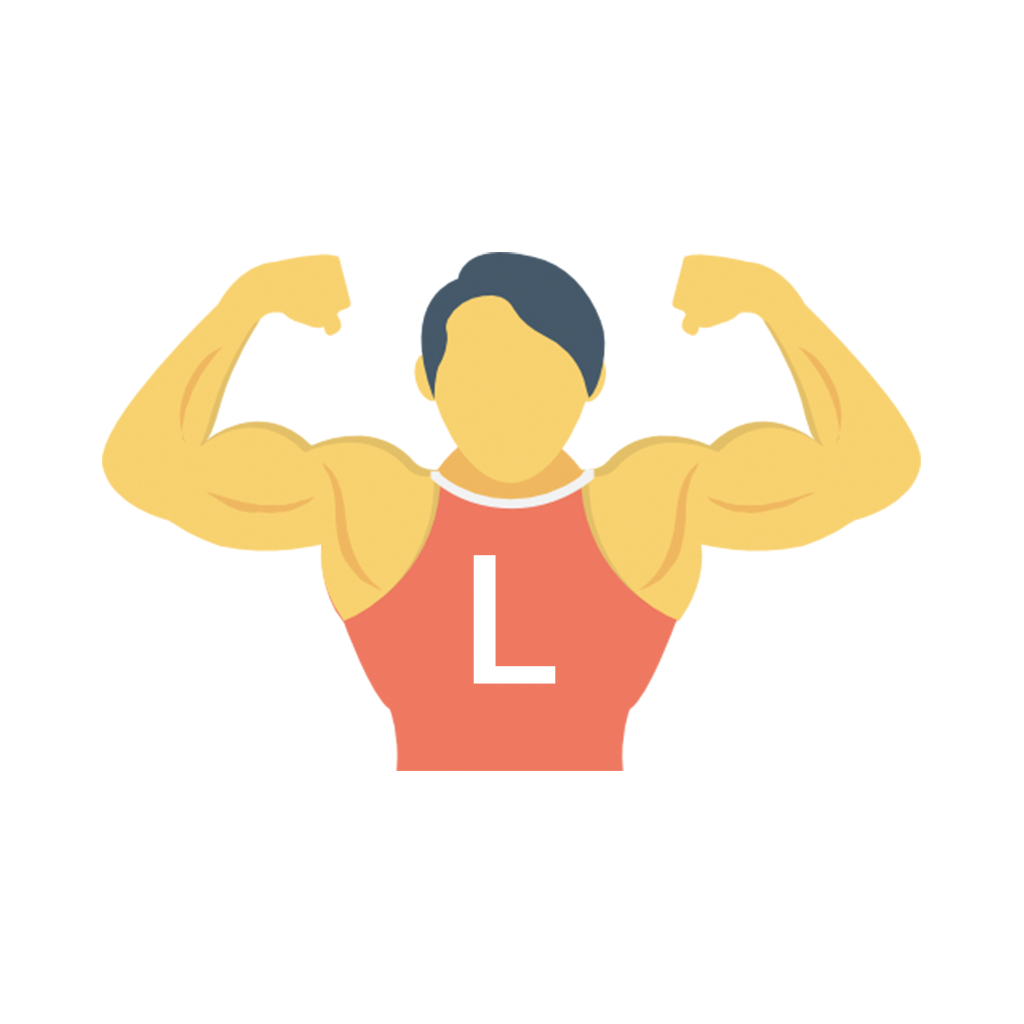
<style>
.page{position:relative;width:1024px;height:1024px;background:#ffffff}
.page>*{position:absolute;margin:0}
.t1{font:180px "Roboto-Medium";color:#ffffff}
</style>
<div class="page">
<p class="t1" style="left:473px;top:555px;width:83px;height:129px">L</p>
</div>
